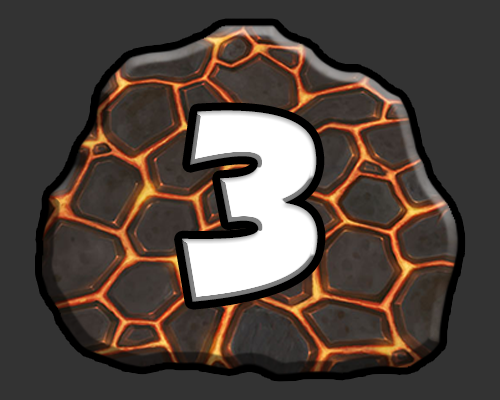
<style>
.page{position:relative;width:500px;height:400px;background:#333333}
.page>*{position:absolute;margin:0}
.t1{font:257.3px "Funhouse";color:#ffffff}
</style>
<div class="page">
<p class="t1" style="left:182px;top:110px;width:136px;height:192px">3</p>
</div>
